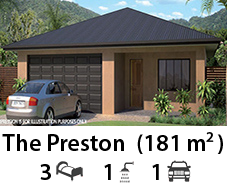
<style>
.page{position:relative;width:227px;height:185px;background:#ffffff}
.page>*{position:absolute;margin:0}
.t1{font:24px "MyriadPro-Semibold";color:#000000}
.t2{font:14px "MyriadPro-Semibold";color:#000000;scale:1.05 1}
</style>
<div class="page">
<p class="t1" style="left:2px;top:134px;width:221px;height:46px;text-align:center">The Preston  (181 m  )<br>3          1       1</p>
<p class="t2" style="left:206px;top:132px;width:8px;height:10px">2</p>
</div>
